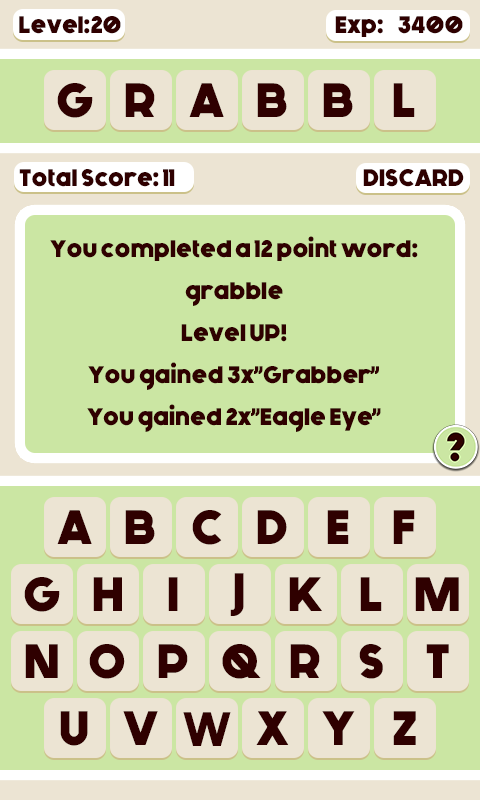
<style>
.page{position:relative;width:480px;height:800px;background:#cbe6a3}
.page>*{position:absolute;margin:0}
.t1{font:24px "Generica-Bold";color:#2f0000}
</style>
<div class="page">
<p class="t1" style="left:19px;top:16px;width:102px;height:18px">Level:20</p>
<p class="t1" style="left:335px;top:16px;width:128px;height:21px">Exp:    3400</p>
<p class="t1" style="left:19px;top:169px;width:156px;height:18px">Total Score: 11</p>
<p class="t1" style="left:363px;top:169px;width:101px;height:18px">DISCARD</p>
<p class="t1" style="left:50px;top:236px;width:368px;height:196px;text-align:center">You completed a 12 point word:<br>grabble<br>Level UP!<br>You gained 3x”Grabber”<br>You gained 2x”Eagle Eye”</p>
</div>
